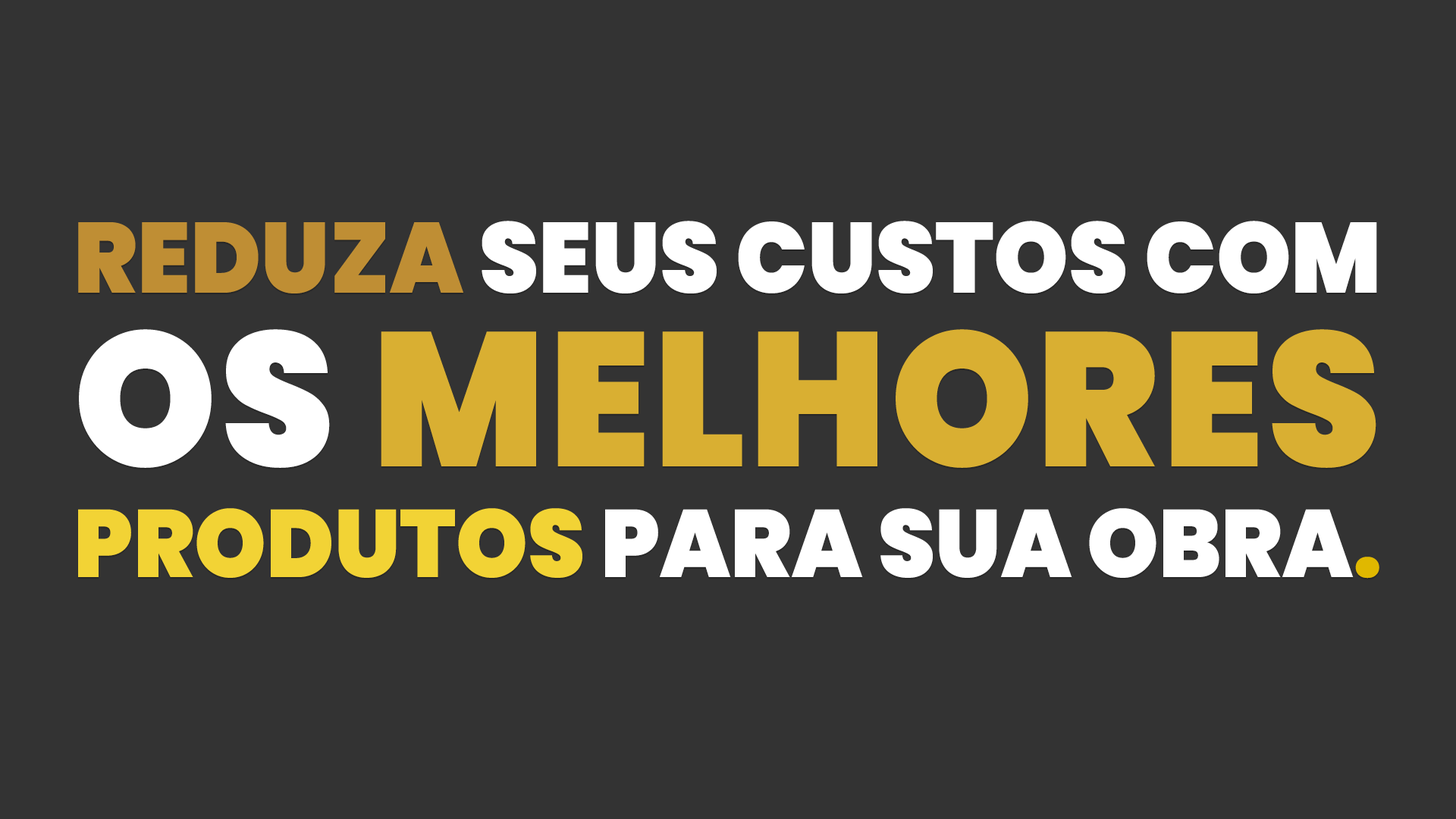
<style>
.page{position:relative;width:1456px;height:819px;background:#333333}
.page>*{position:absolute;margin:0}
.t1{font:99.6px "Poppins-Black";color:#ffffff;scale:0.96 1}
.t2{font:99.6px "Poppins-Black";color:#bf8e34;scale:0.96 1}
.t3{font:190.1px/173.2px "Poppins-Black";letter-spacing:0.02em;color:#ffffff;scale:0.96 1}
.t4{font:190.1px/173.2px "Poppins-Black";letter-spacing:0.02em;color:#d9af32;scale:0.96 1}
.t5{font:95.6px/110.5px "Poppins-Black";color:#f2d335;scale:0.96 1}
.t6{font:95.6px/110.5px "Poppins-Black";color:#ffffff;scale:0.96 1}
.t7{font:95.6px/110.5px "Poppins-Black";color:#e0b800;scale:0.96 1}
</style>
<div class="page">
<p class="t1" style="left:78px;top:221px;width:1301px;height:358px"><span class="t2">REDUZA</span> SEUS CUSTOS COM<br><span class="t3">OS </span><span class="t4">MELHORES<br></span><span class="t5">PRODUTOS</span><span class="t6"> PARA SUA OBRA</span><span class="t7">.</span></p>
</div>
